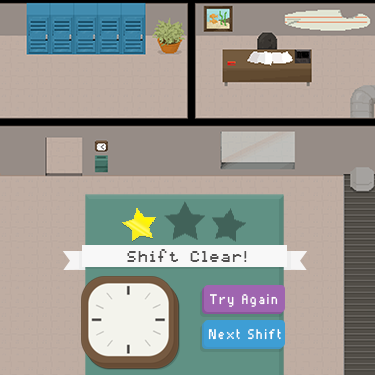
<style>
.page{position:relative;width:375px;height:375px;background:#bfada2}
.page>*{position:absolute;margin:0}
.t1{font:13.4px "pixelmix";letter-spacing:0.1em;color:#525050}
.t2{font:18px "Pixelade";letter-spacing:0.1em;color:#ffffff;scale:0.96 1}
</style>
<div class="page">
<p class="t1" style="left:127px;top:249px;width:120px;height:13px">Shift Clear!</p>
<p class="t2" style="left:210px;top:294px;width:68px;height:13px">Try Again</p>
<p class="t2" style="left:208px;top:329px;width:73px;height:11px">Next Shift</p>
</div>
